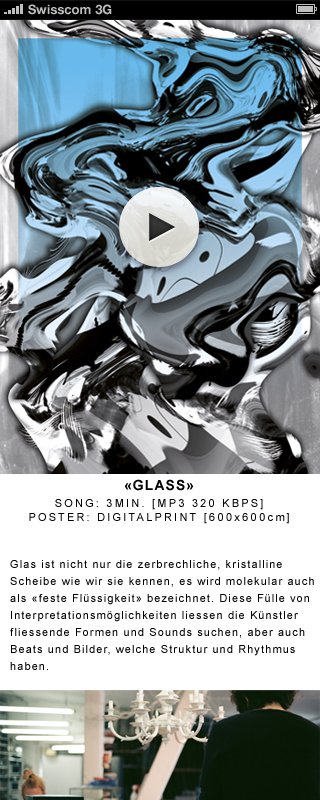
<style>
.page{position:relative;width:320px;height:800px;background:#ffffff}
.page>*{position:absolute;margin:0}
.t1{font:13px "HelveticaNeue-Bold";color:#bfbfbf}
.t2{font:13px "HelveticaNeue-Bold";color:#bfbfbf;text-transform:uppercase}
.t3{font:11px "ArialMT";letter-spacing:0.2em;color:#000000}
.t4{font:14px "Arial-BoldMT";letter-spacing:0.075em;color:#000000}
.t5{font:11px/17px "ArialMT";letter-spacing:0.2em;color:#000000}
.t6{font:11px/17px "ArialMT";letter-spacing:0.1em;color:#000000}
</style>
<div class="page">
<p class="t1" style="left:28px;top:4px;width:63px;height:11px"><span class="t2">S</span>wisscom</p>
<p class="t2" style="left:95px;top:4px;width:17px;height:11px">3G</p>
<p class="t3" style="left:29px;top:479px;width:260px;height:45px;text-align:center"><span class="t4">«GLASS»<br></span><span class="t5">SONG: 3MIN. [MP3 320 KBPS]<br></span>POSTER: DIGITALPRINT [600x600cm]</p>
<p class="t6" style="left:10px;top:560px;width:304px;height:110px">Glas ist nicht nur die zerbrechliche, kristalline Scheibe wie wir sie kennen, es wird molekular auch als «feste Flüssigkeit» bezeichnet. Diese Fülle von Interpretationsmöglichkeiten liessen die Künstler fliessende Formen und Sounds suchen, aber auch Beats und Bilder, welche Struktur und Rhythmus haben.</p>
</div>
